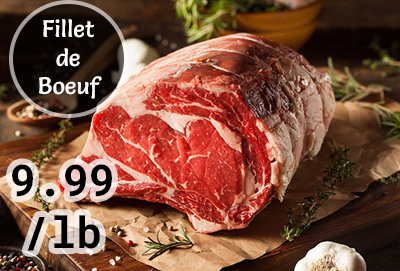
<style>
.page{position:relative;width:400px;height:271px}
.page>*{position:absolute;margin:0}
.t1{font:23.8px "Salsa-Regular";color:#ffffff}
.t2{font:43.7px "RobotoMono-Bold";color:#000000}
</style>
<div class="page">
<p class="t1" style="left:39px;top:19px;width:63px;height:80px;text-align:center">Fillet<br>de<br>Boeuf</p>
<p class="t2" style="left:12px;top:164px;width:100px;height:87px;text-align:center">9.99<br>/lb</p>
</div>
